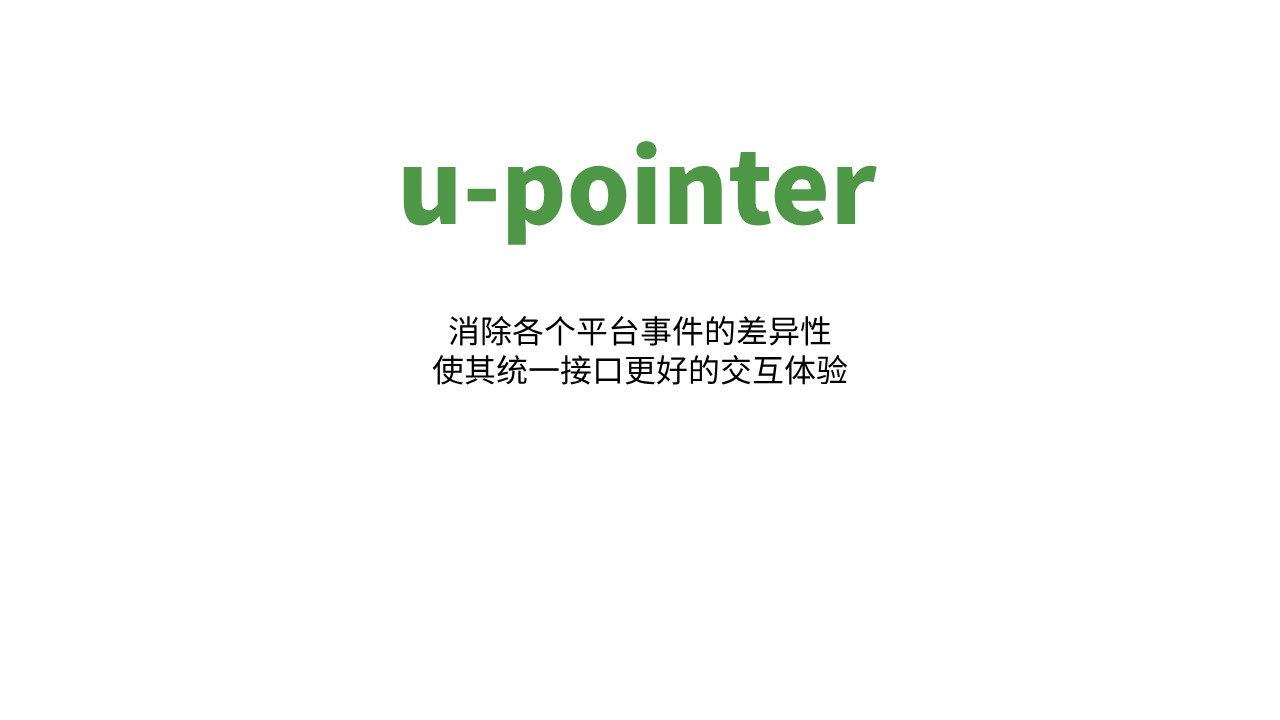
<style>
.page{position:relative;width:1280px;height:720px;background:#ffffff}
.page>*{position:absolute;margin:0}
.t1{font:100px "SourceHanSansSC-Heavy";color:#4e9746}
.t2{font:32px "SourceHanSansSC-Regular";color:#000000}
</style>
<div class="page">
<p class="t1" style="left:403px;top:140px;width:474px;height:105px">u-pointer</p>
<p class="t2" style="left:432px;top:315px;width:416px;height:70px;text-align:center">消除各个平台事件的差异性<br>使其统一接口更好的交互体验</p>
</div>
